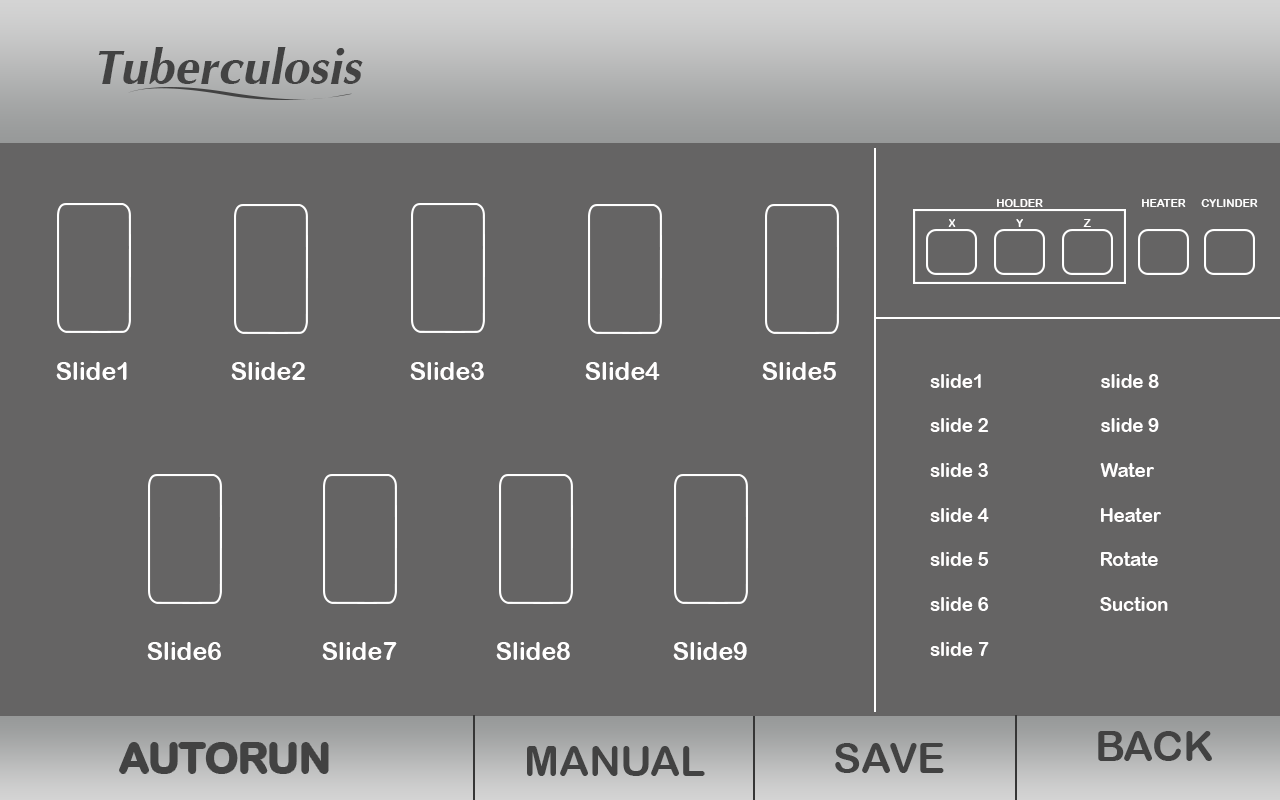
<style>
.page{position:relative;width:1280px;height:800px;background:#656464}
.page>*{position:absolute;margin:0}
.t1{font:75px "IrisUPCBoldItalic";color:#424242}
.t2{font:10.9px "ArialRoundedMTBold";color:#fffefe}
.t3{font:10.9px "ArialRoundedMTBold";color:#ffffff}
.t4{font:10.9px "ArialRoundedMTBold";color:#fdfdfd}
.t5{font:10.9px "ArialRoundedMTBold";color:#fefdfd}
.t6{font:25px "ArialRoundedMTBold";color:#fffefe}
.t7{font:18.6px "ArialRoundedMTBold";color:#fffefe}
.t8{font:41.7px "ArialRoundedMTBold";color:#424242}
</style>
<div class="page">
<p class="t1" style="left:98px;top:47px;width:265px;height:37px">Tuberculosis</p>
<p class="t2" style="left:997px;top:199px;width:46px;height:8px">HOLDER</p>
<p class="t3" style="left:1142px;top:199px;width:44px;height:8px">HEATER</p>
<p class="t4" style="left:1201px;top:199px;width:57px;height:8px">CYLINDER</p>
<p class="t4" style="left:948px;top:219px;width:8px;height:8px">X</p>
<p class="t3" style="left:1016px;top:219px;width:7px;height:8px">Y</p>
<p class="t5" style="left:1083px;top:219px;width:8px;height:8px">Z</p>
<p class="t6" style="left:56px;top:362px;width:71px;height:18px">Slide1</p>
<p class="t6" style="left:231px;top:362px;width:74px;height:18px">Slide2</p>
<p class="t6" style="left:410px;top:362px;width:74px;height:18px">Slide3</p>
<p class="t6" style="left:585px;top:362px;width:75px;height:18px">Slide4</p>
<p class="t6" style="left:762px;top:362px;width:74px;height:18px">Slide5</p>
<p class="t7" style="left:930px;top:374px;width:51px;height:14px">slide1</p>
<p class="t7" style="left:1101px;top:374px;width:58px;height:14px">slide 8</p>
<p class="t7" style="left:930px;top:418px;width:59px;height:14px">slide 2</p>
<p class="t7" style="left:1101px;top:418px;width:58px;height:14px">slide 9</p>
<p class="t7" style="left:930px;top:463px;width:58px;height:14px">slide 3</p>
<p class="t7" style="left:1100px;top:463px;width:54px;height:14px">Water</p>
<p class="t7" style="left:930px;top:508px;width:59px;height:14px">slide 4</p>
<p class="t7" style="left:1101px;top:508px;width:60px;height:14px">Heater</p>
<p class="t7" style="left:930px;top:552px;width:59px;height:14px">slide 5</p>
<p class="t7" style="left:1101px;top:552px;width:57px;height:14px">Rotate</p>
<p class="t7" style="left:930px;top:597px;width:59px;height:14px">slide 6</p>
<p class="t7" style="left:1100px;top:597px;width:68px;height:14px">Suction</p>
<p class="t6" style="left:147px;top:642px;width:74px;height:18px">Slide6</p>
<p class="t6" style="left:322px;top:642px;width:75px;height:18px">Slide7</p>
<p class="t6" style="left:496px;top:642px;width:74px;height:18px">Slide8</p>
<p class="t6" style="left:673px;top:642px;width:74px;height:18px">Slide9</p>
<p class="t7" style="left:930px;top:642px;width:59px;height:14px">slide 7</p>
<p class="t8" style="left:1098px;top:731px;width:114px;height:30px">BACK</p>
<p class="t8" style="left:120px;top:743px;width:208px;height:30px">AUTORUN</p>
<p class="t8" style="left:527px;top:746px;width:178px;height:30px">MANUAL</p>
<p class="t8" style="left:835px;top:743px;width:109px;height:30px">SAVE</p>
</div>
